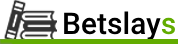
<style>
.page{position:relative;width:178px;height:44px;background:#ffffff}
.page>*{position:absolute;margin:0}
.t1{font:30px "Roboto-Medium";color:#000000}
.t2{font:30px "Roboto-Medium";color:#62ac00}
</style>
<div class="page">
<p class="t1" style="left:64px;top:11px;width:111px;height:30px">Betslay<span class="t2">s</span></p>
</div>
